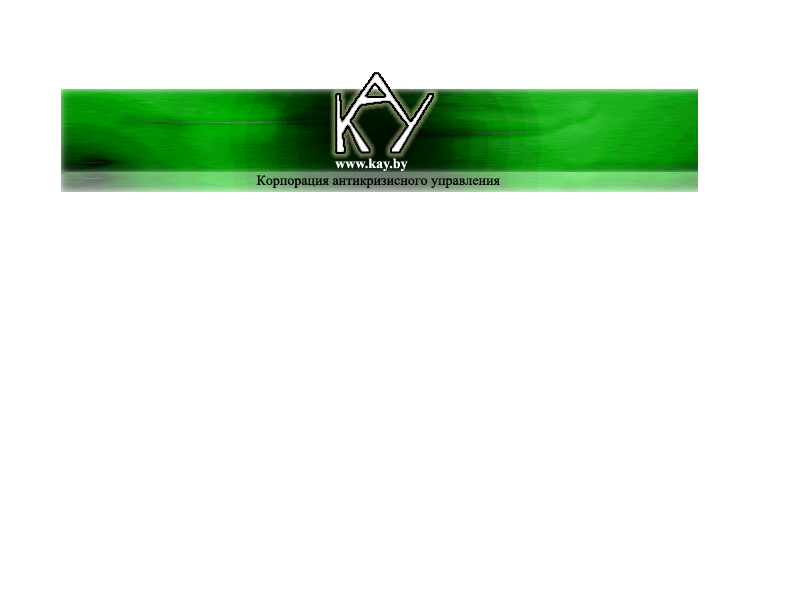
<style>
.page{position:relative;width:800px;height:600px;background:#ffffff}
.page>*{position:absolute;margin:0}
.t1{font:14px "TimesNewRomanPS-BoldMT";color:#ffffff}
.t2{font:14px "TimesNewRomanPSMT";color:#000000}
</style>
<div class="page">
<p class="t1" style="left:335px;top:158px;width:73px;height:13px">www.kay.by</p>
<p class="t2" style="left:256px;top:175px;width:244px;height:13px">Корпорация антикризисного управления</p>
</div>
